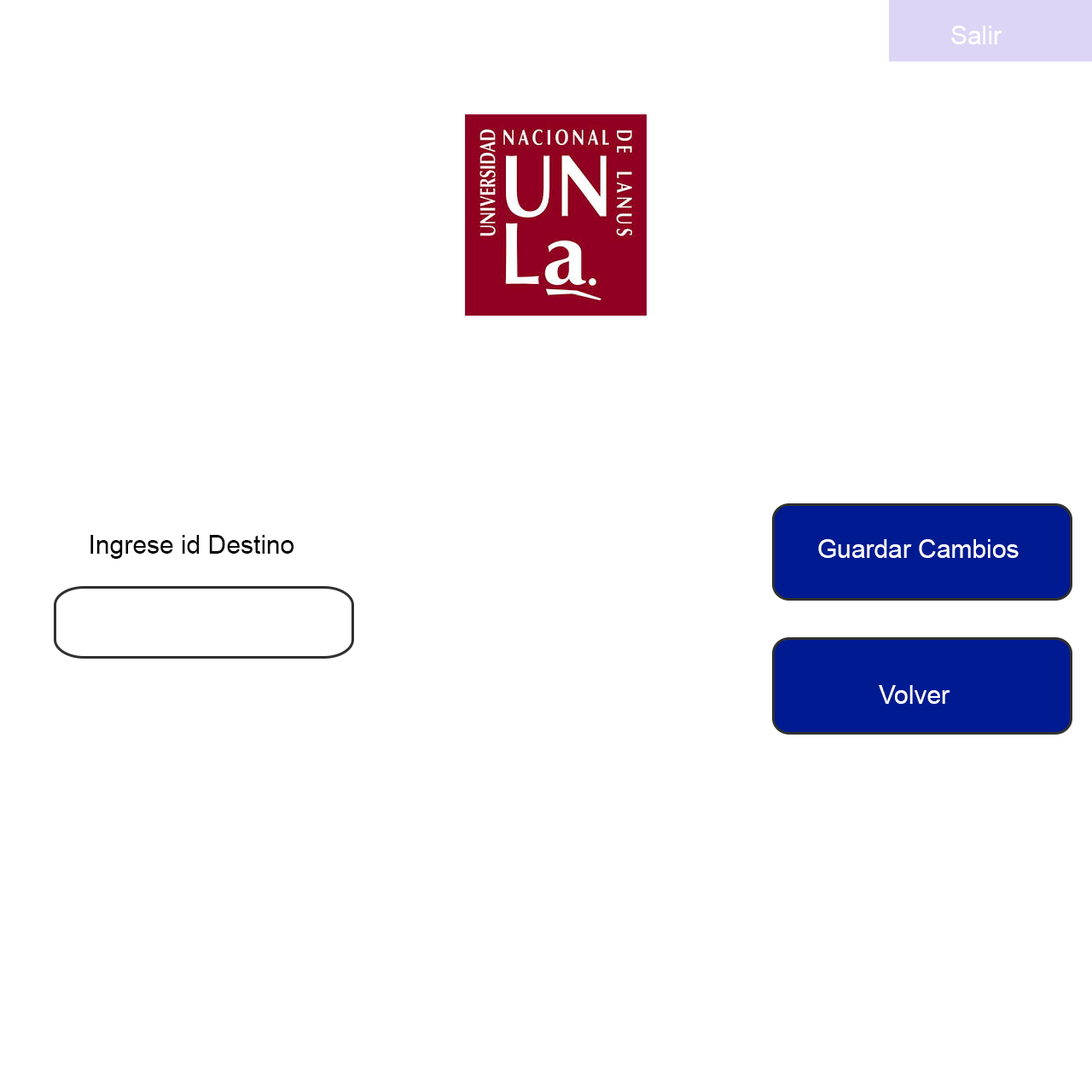
<style>
.page{position:relative;width:1092px;height:1092px;background:#ffffff}
.page>*{position:absolute;margin:0}
.t1{font:25.6px "ArialMT";color:#ffffff}
.t2{font:25.6px "ArialMT";color:#000000}
</style>
<div class="page">
<p class="t1" style="left:951px;top:26px;width:51px;height:18px">Salir</p>
<p class="t2" style="left:90px;top:535px;width:204px;height:24px">Ingrese id Destino</p>
<p class="t1" style="left:818px;top:539px;width:201px;height:19px">Guardar Cambios</p>
<p class="t1" style="left:879px;top:685px;width:71px;height:19px">Volver</p>
</div>
